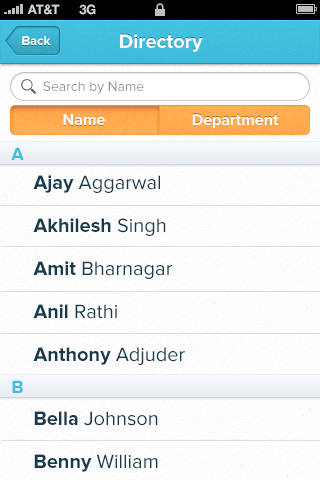
<style>
.page{position:relative;width:320px;height:480px;background:#fdfdfd}
.page>*{position:absolute;margin:0}
.t1{font:13px "HelveticaNeue-Bold";color:#d4d4d4;text-transform:uppercase}
.t2{font:13px "ProximaNova-Bold";color:#ffffff}
.t3{font:20px "ProximaNova-Bold";color:#ffffff}
.t4{font:14px "ProximaNova-Regular";color:#919699}
.t5{font:16px "ProximaNova-Bold";color:#ffffff}
.t6{font:18px "ProximaNova-Bold";color:#41bedd}
.t7{font:20px/43px "ProximaNova-Regular";color:#173b4c}
.t8{font:20px/43px "ProximaNova-Bold";color:#173b4c}
</style>
<div class="page">
<p class="t1" style="left:27px;top:4px;width:33px;height:11px">AT&amp;t</p>
<p class="t1" style="left:79px;top:4px;width:17px;height:11px">3G</p>
<p class="t2" style="left:22px;top:36px;width:29px;height:9px">Back</p>
<p class="t3" style="left:120px;top:34px;width:83px;height:18px">Directory</p>
<p class="t4" style="left:43px;top:81px;width:101px;height:13px">Search by Name</p>
<p class="t5" style="left:63px;top:114px;width:42px;height:11px">Name</p>
<p class="t5" style="left:192px;top:114px;width:87px;height:14px">Department</p>
<p class="t6" style="left:11px;top:147px;width:13px;height:13px">A</p>
<p class="t7" style="left:33px;top:175px;width:152px;height:190px"><span class="t8">Ajay</span> Aggarwal<br><span class="t8">Akhilesh</span> Singh<br><span class="t8">Amit</span> Bharnagar<br><span class="t8">Anil</span> Rathi<br><span class="t8">Anthony</span> Adjuder</p>
<p class="t6" style="left:12px;top:380px;width:11px;height:13px">B</p>
<p class="t7" style="left:34px;top:411px;width:124px;height:61px"><span class="t8">Bella </span>Johnson<br><span class="t8">Benny</span> William</p>
</div>
